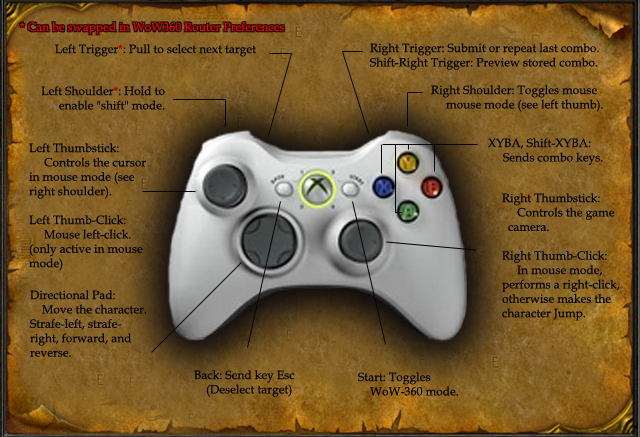
<style>
.page{position:relative;width:640px;height:437px}
.page>*{position:absolute;margin:0}
.t1{font:12px "BookAntiqua";color:#ff0000}
.t2{font:12px "BookAntiqua";color:#07060b}
.t3{font:12px "BookAntiqua";color:#b80000}
</style>
<div class="page">
<p class="t1" style="left:20px;top:22px;width:265px;height:13px">* Can be swapped in WoW360 Router Preferences</p>
<p class="t2" style="left:55px;top:44px;width:201px;height:13px">Left Trigger<span class="t3">*</span>: Pull to select next target</p>
<p class="t2" style="left:370px;top:43px;width:229px;height:27px">Right Trigger: Submit or repeat last combo.<br>Shift-Right Trigger: Preview stored combo.</p>
<p class="t2" style="left:41px;top:86px;width:124px;height:24px;text-align:right">Left Shoulder<span class="t3">*</span>: Hold to<br>enable "shift" mode.</p>
<p class="t2" style="left:431px;top:85px;width:172px;height:27px">Right Shoulder: Toggles mouse<br>     mouse mode (see left thumb).</p>
<p class="t2" style="left:29px;top:143px;width:117px;height:128px">Left Thumbstick:<br>     Controls the cursor<br>in mouse mode (see<br>right shoulder). <br><br>Left Thumb-Click:<br>     Mouse left-click.<br>(only active in mouse<br>mode)</p>
<p class="t2" style="left:488px;top:138px;width:115px;height:27px">XYBA, Shift-XYBA: <br>     Sends combo keys.</p>
<p class="t2" style="left:502px;top:193px;width:118px;height:128px">Right Thumbstick:<br>     Controls the game <br>  camera.<br><br>Right Thumb-Click:<br>     In mouse mode, <br>performs a right-click,<br>otherwise makes the <br>character Jump.</p>
<p class="t2" style="left:30px;top:290px;width:117px;height:67px">Directional Pad:<br>    Move the character.<br>Strafe-left, strafe-<br>right, forward, and <br>reverse.</p>
<p class="t2" style="left:194px;top:370px;width:101px;height:27px">Back: Send key Esc<br>    (Deselect target)</p>
<p class="t2" style="left:358px;top:372px;width:100px;height:24px">Start: Toggles <br>    WoW-360 mode.</p>
</div>
